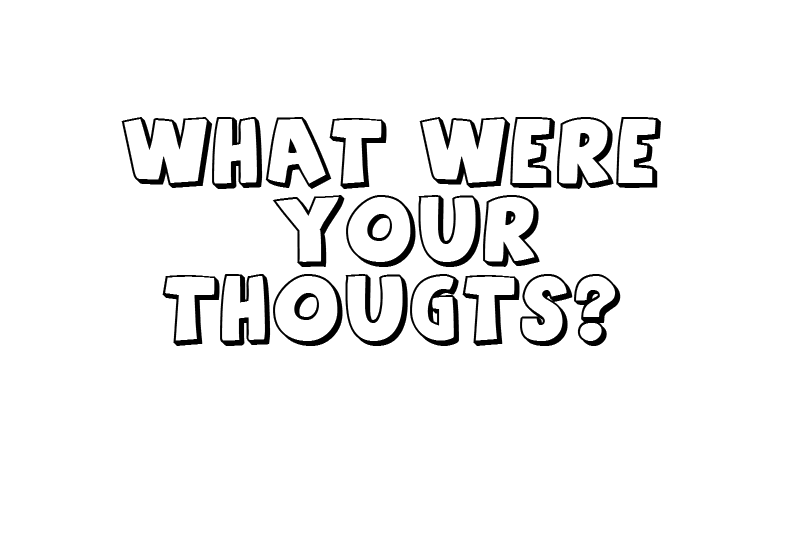
<style>
.page{position:relative;width:800px;height:554px;background:#ffffff}
.page>*{position:absolute;margin:0}
.t1{font:65.3px "AgentOrange";color:#000000}
</style>
<div class="page">
<p class="t1" style="left:121px;top:117px;width:540px;height:229px;text-align:center">What were<br>your <br>?thougts</p>
</div>
